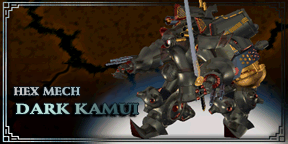
<style>
.page{position:relative;width:288px;height:144px}
.page>*{position:absolute;margin:0}
.t1{font:11px "StempelSchneidlerStd-Black";color:#b7c1c5}
.t2{font:14.3px "StempelSchneidlerStd-Black";scale:1.15 1}
</style>
<div class="page">
<p class="t1" style="left:14px;top:87px;width:66px;height:9px">HEX MECH</p>
<p class="t2" style="left:16px;top:103px;width:123px;height:12px">DARK KAMUI</p>
</div>
